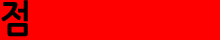
<style>
.page{position:relative;width:220px;height:40px;background:#ff0000}
.page>*{position:absolute;margin:0}
.t1{font:38.4px "NanumGothicBold";color:#000000;scale:0.88 1}
</style>
<div class="page">
<p class="t1" style="left:1px;top:0px;width:27px;height:37px">점</p>
</div>
